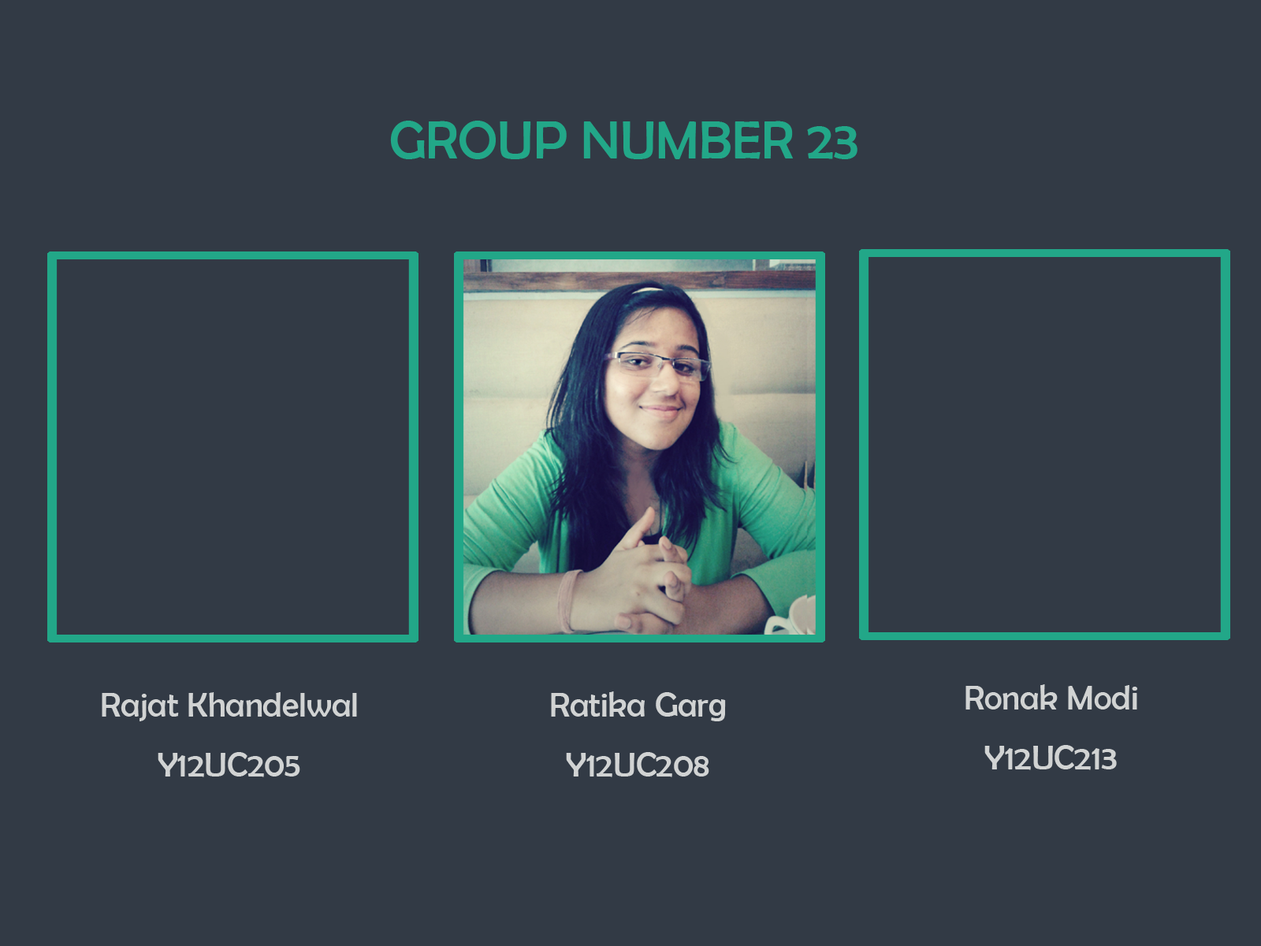
<style>
.page{position:relative;width:1261px;height:946px;background:#323a45}
.page>*{position:absolute;margin:0}
.t1{font:54.3px "BerlinSansFB-Reg";color:#22a788}
.t2{font:34.5px/59.6px "BerlinSansFB-Reg";color:#d1d3d3}
</style>
<div class="page">
<p class="t1" style="left:390px;top:121px;width:467px;height:38px">GROUP NUMBER 23</p>
<p class="t2" style="left:965px;top:684px;width:172px;height:86px;text-align:center">Ronak Modi<br>Y12UC213</p>
<p class="t2" style="left:102px;top:692px;width:255px;height:85px;text-align:center">Rajat Khandelwal<br>Y12UC205</p>
<p class="t2" style="left:551px;top:691px;width:175px;height:86px;text-align:center">Ratika Garg<br>Y12UC208</p>
</div>
